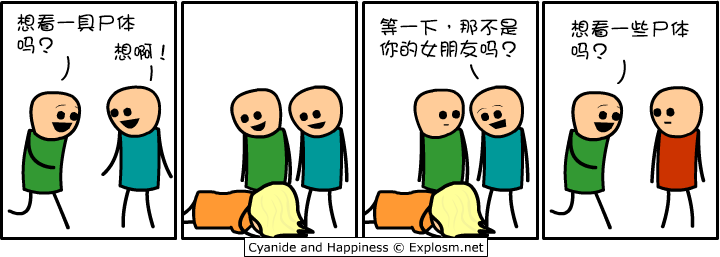
<style>
.page{position:relative;width:720px;height:257px;background:#ffffff}
.page>*{position:absolute;margin:0}
.t1{font:20px/22px "DFGirl";color:#000000}
.t2{font:20px "DFGirl";color:#000000}
</style>
<div class="page">
<p class="t1" style="left:17px;top:13px;width:118px;height:41px">想看一具尸体<br>吗？</p>
<p class="t1" style="left:379px;top:18px;width:139px;height:40px">等一下，那不是<br>你的女朋友吗？</p>
<p class="t1" style="left:571px;top:19px;width:118px;height:41px">想看一些尸体<br>吗？</p>
<p class="t2" style="left:114px;top:42px;width:51px;height:19px">想啊！</p>
</div>
